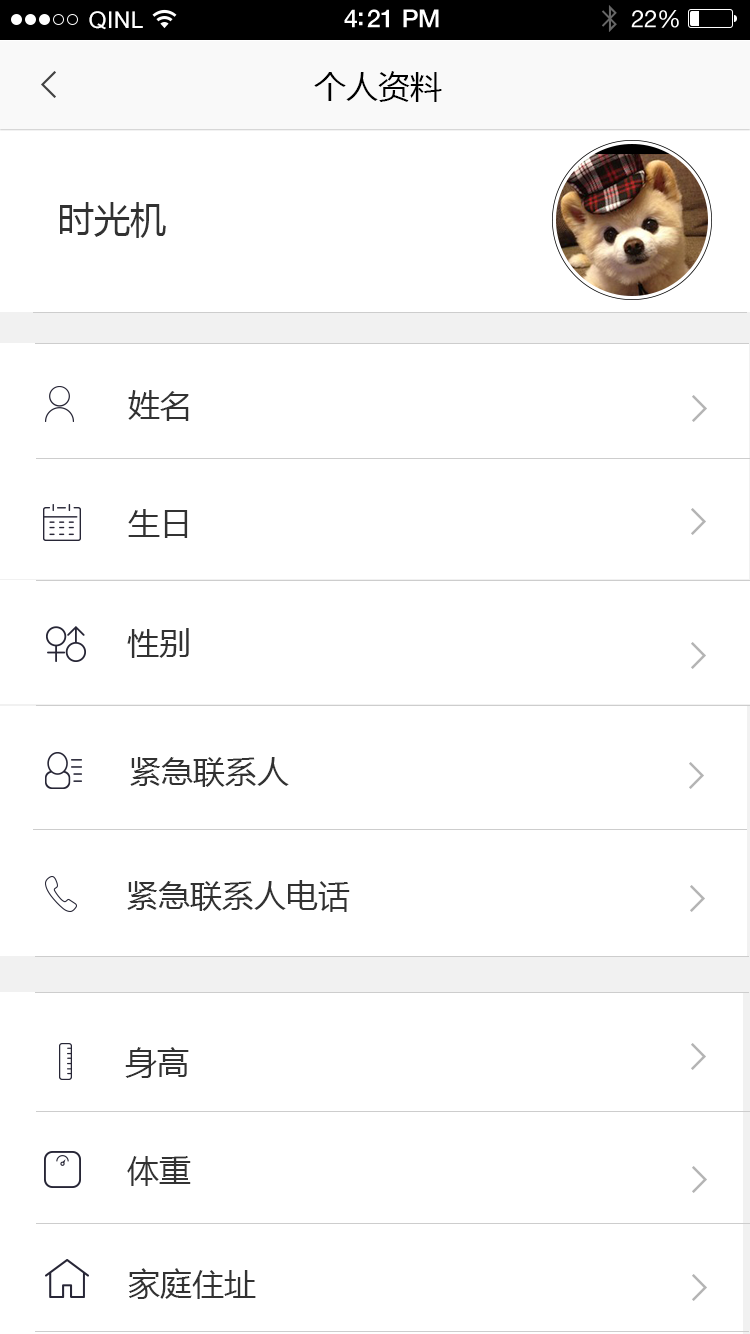
<style>
.page{position:relative;width:750px;height:1334px;background:#ffffff}
.page>*{position:absolute;margin:0}
.t1{font:23px "ArialUnicodeMS";letter-spacing:0.02em;color:#ffffff}
.t2{font:25px "HelveticaNeue-Medium";letter-spacing:-0.02em;color:#ffffff}
.t3{font:24px "HelveticaNeue";letter-spacing:-0.02em;color:#ffffff}
.t4{font:32px "MicrosoftYaHei";color:#000000}
.t5{font:36px "MicrosoftYaHei";color:#323232}
.t6{font:32px "MicrosoftYaHei";color:#323232}
</style>
<div class="page">
<p class="t1" style="left:89px;top:11px;width:54px;height:19px">QINL</p>
<p class="t2" style="left:344px;top:9px;width:95px;height:19px">4:21 PM</p>
<p class="t3" style="left:631px;top:10px;width:48px;height:18px">22%</p>
<p class="t4" style="left:314px;top:71px;width:128px;height:31px">个人资料</p>
<p class="t5" style="left:60px;top:202px;width:106px;height:36px">时光机</p>
<p class="t6" style="left:128px;top:390px;width:61px;height:31px">姓名</p>
<p class="t6" style="left:128px;top:509px;width:60px;height:29px">生日</p>
<p class="t6" style="left:127px;top:628px;width:62px;height:30px">性别</p>
<p class="t6" style="left:130px;top:757px;width:159px;height:30px">紧急联系人</p>
<p class="t6" style="left:127px;top:880px;width:223px;height:32px">紧急联系人电话</p>
<p class="t6" style="left:125px;top:1047px;width:64px;height:31px">身高</p>
<p class="t6" style="left:127px;top:1156px;width:64px;height:30px">体重</p>
<p class="t6" style="left:128px;top:1268px;width:128px;height:31px">家庭住址</p>
</div>
